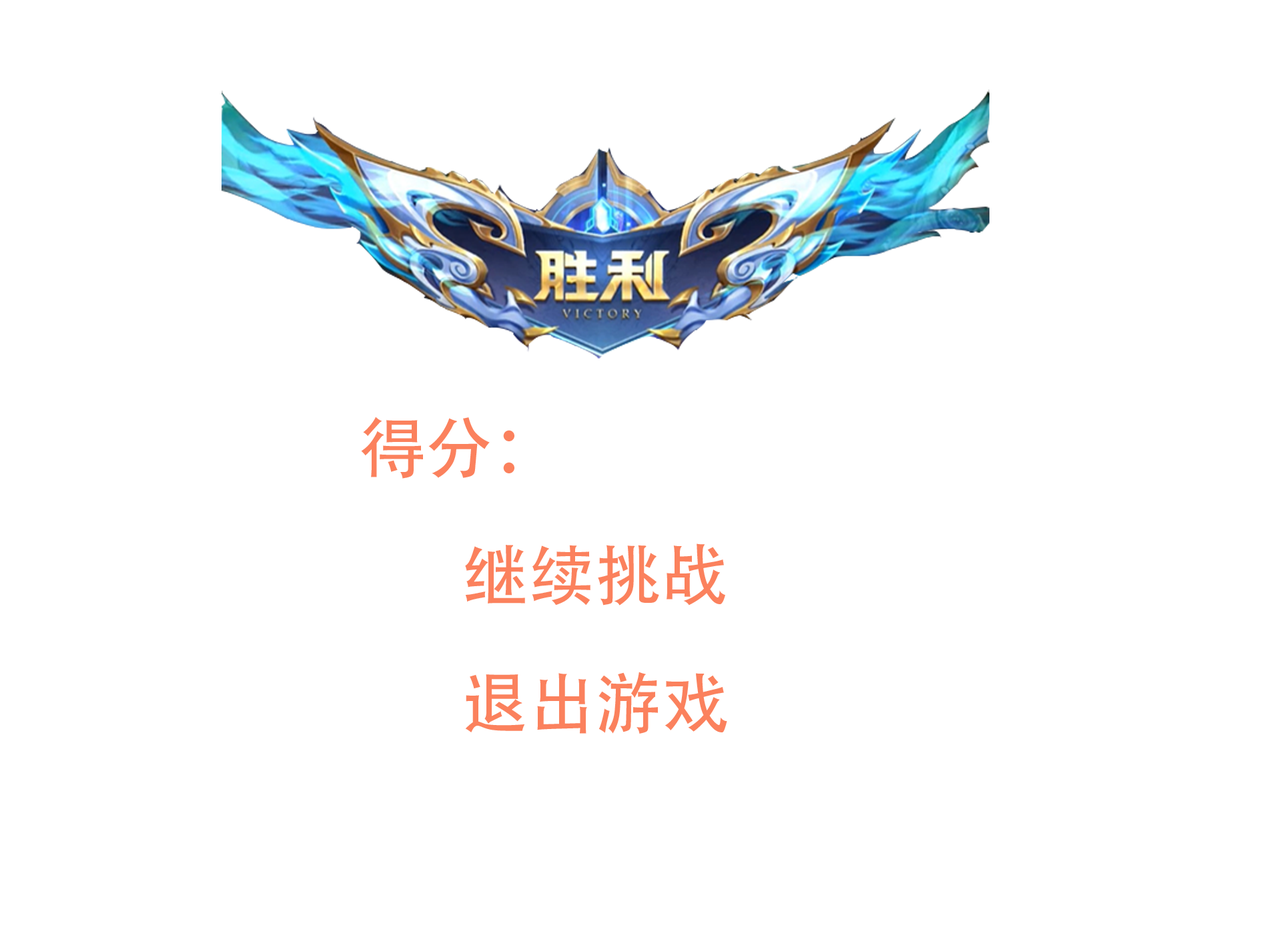
<style>
.page{position:relative;width:1261px;height:946px;background:#ffffff}
.page>*{position:absolute;margin:0}
.t1{font:66.7px "AdobeHeitiStd-Regular";color:#fb815d}
</style>
<div class="page">
<p class="t1" style="left:361px;top:416px;width:153px;height:62px">得分：</p>
<p class="t1" style="left:465px;top:543px;width:260px;height:62px">继续挑战</p>
<p class="t1" style="left:465px;top:671px;width:262px;height:62px">退出游戏</p>
</div>
